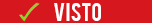
<style>
.page{position:relative;width:152px;height:23px;background:#d7171e}
.page>*{position:absolute;margin:0}
.t1{font:20px "Bebas";color:#ffffff}
</style>
<div class="page">
<p class="t1" style="left:54px;top:3px;width:47px;height:18px">Visto</p>
</div>
